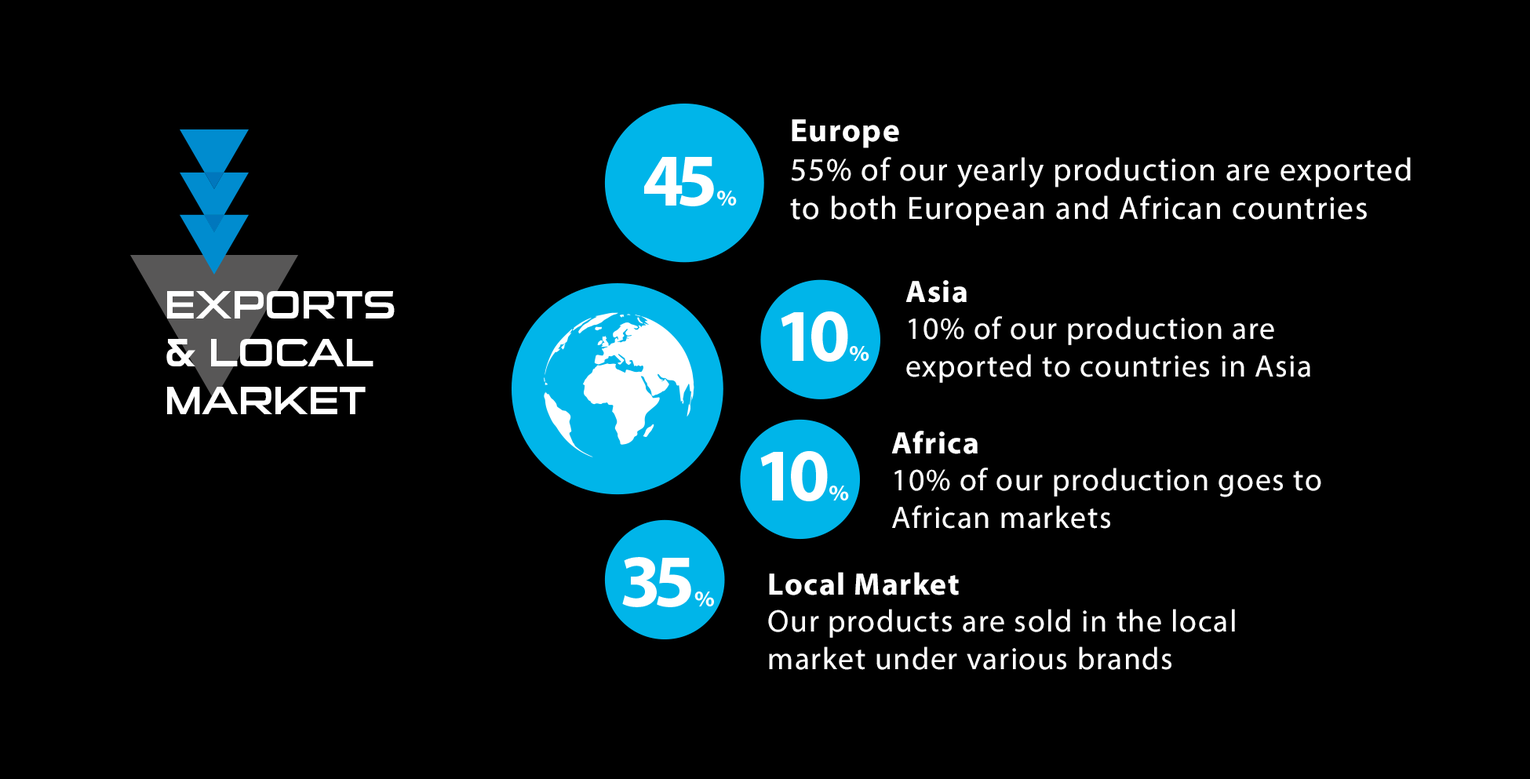
<style>
.page{position:relative;width:1530px;height:779px;background:#000000}
.page>*{position:absolute;margin:0}
.t1{font:32.3px "MyriadPro-Regular";letter-spacing:0.04em;color:#ffffff}
.t2{font:32.3px "MyriadPro-Bold";letter-spacing:0.04em;color:#ffffff}
.t3{font:31.1px "MyriadPro-Regular";letter-spacing:0.04em;color:#ffffff}
.t4{font:31.1px "MyriadPro-Bold";letter-spacing:0.04em;color:#ffffff}
.t5{font:40px "SuiGenerisRg-Regular";color:#ffffff;text-transform:uppercase}
</style>
<div class="page">
<p class="t1" style="left:790px;top:119px;width:621px;height:107px"><span class="t2">Europe<br></span>55% of our yearly production are exported to both European and African countries</p>
<p class="t3" style="left:906px;top:280px;width:405px;height:103px"><span class="t4">Asia<br></span>10% of our production are <br>exported to countries in Asia</p>
<p class="t5" style="left:166px;top:291px;width:229px;height:123px">Exports <br>&amp; Local <br>Market</p>
<p class="t3" style="left:891px;top:431px;width:430px;height:98px"><span class="t4">Africa<br></span>10% of our production goes to African markets</p>
<p class="t3" style="left:768px;top:572px;width:467px;height:98px"><span class="t4">Local Market<br></span>Our products are sold in the local market under various brands</p>
</div>
